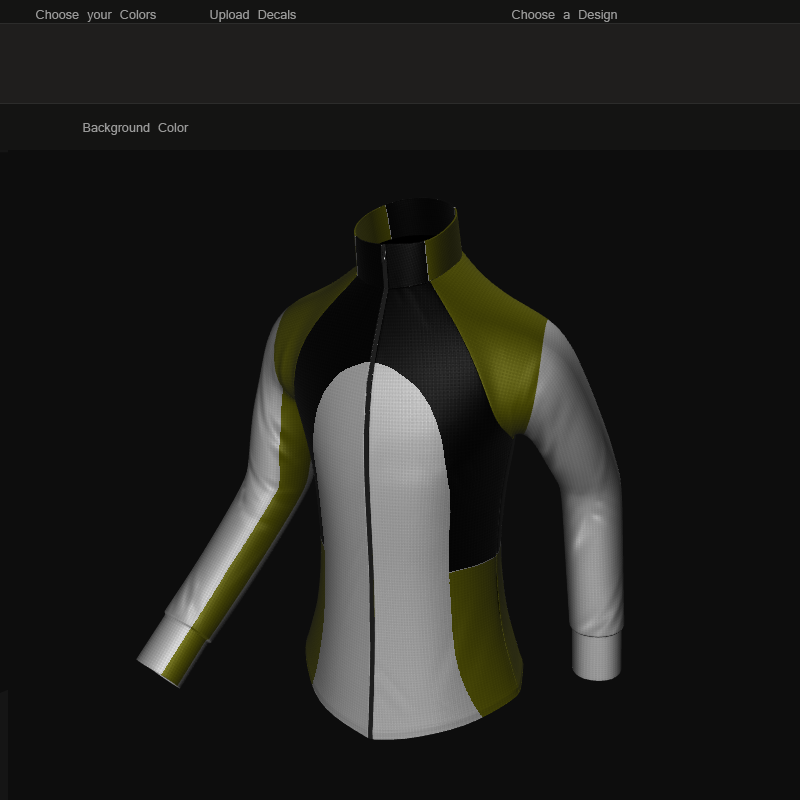
<style>
.page{position:relative;width:800px;height:800px;background:#0d0d0d}
.page>*{position:absolute;margin:0}
.t1{font:14px "Latha";color:#999998}
</style>
<div class="page">
<p class="t1" style="left:36px;top:10px;width:120px;height:12px">Choose your Colors</p>
<p class="t1" style="left:210px;top:10px;width:86px;height:12px">Upload Decals</p>
<p class="t1" style="left:512px;top:10px;width:105px;height:12px">Choose a Design</p>
<p class="t1" style="left:83px;top:123px;width:106px;height:12px">Background Color</p>
</div>
